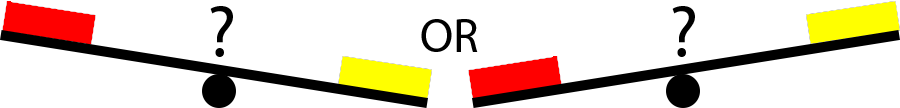
<style>
.page{position:relative;width:900px;height:108px;background:#ffffff}
.page>*{position:absolute;margin:0}
.t1{font:72px "MyriadPro-Regular";color:#000000}
.t2{font:48px "MyriadPro-Regular";color:#000000}
</style>
<div class="page">
<p class="t1" style="left:210px;top:6px;width:23px;height:51px">?</p>
<p class="t1" style="left:672px;top:6px;width:23px;height:51px">?</p>
<p class="t2" style="left:421px;top:19px;width:57px;height:33px">OR</p>
</div>
